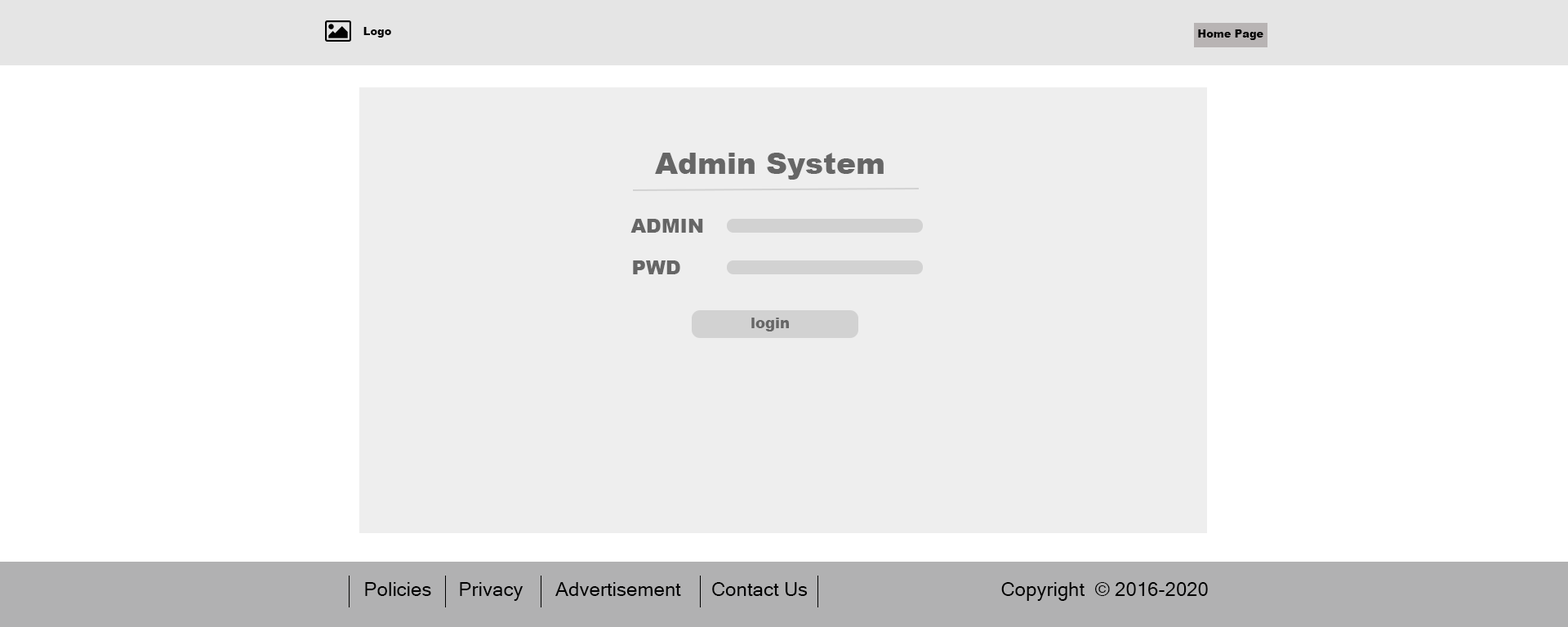
<style>
.page{position:relative;width:1568px;height:627px;background:#ffffff}
.page>*{position:absolute;margin:0}
.t1{font:10.6px "Arial-Black";color:#050505}
.t2{font:29.4px "Arial-Black";color:#666666}
.t3{font:19.6px "Arial-Black";color:#666666}
.t4{font:14.7px "Arial-Black";color:#666666}
.t5{font:19.6px "MicrosoftSansSerif";color:#000000}
</style>
<div class="page">
<p class="t1" style="left:363px;top:27px;width:28px;height:11px">Logo</p>
<p class="t1" style="left:1198px;top:29px;width:65px;height:11px">Home Page</p>
<p class="t2" style="left:655px;top:153px;width:229px;height:27px">Admin System</p>
<p class="t3" style="left:630px;top:219px;width:73px;height:14px">ADMIN</p>
<p class="t3" style="left:633px;top:261px;width:47px;height:13px">PWD</p>
<p class="t4" style="left:751px;top:318px;width:38px;height:14px">login</p>
<p class="t5" style="left:365px;top:582px;width:66px;height:14px">Policies</p>
<p class="t5" style="left:460px;top:582px;width:63px;height:19px">Privacy</p>
<p class="t5" style="left:555px;top:582px;width:126px;height:14px">Advertisement</p>
<p class="t5" style="left:712px;top:582px;width:96px;height:14px">Contact Us</p>
<p class="t5" style="left:1001px;top:582px;width:207px;height:19px">Copyright  © 2016-2020</p>
</div>
